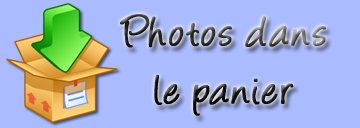
<style>
.page{position:relative;width:360px;height:128px;background:#aabbff}
.page>*{position:absolute;margin:0}
.t1{font:48px "Angelina";font-weight:bold}
</style>
<div class="page">
<p class="t1" style="left:120px;top:14px;width:206px;height:102px;text-align:center">Photos dans<br>le panier</p>
</div>
